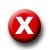
<style>
.page{position:relative;width:50px;height:50px;background:#ffffff}
.page>*{position:absolute;margin:0}
.t1{font:24px "Arial-Black";color:#ffffff}
</style>
<div class="page">
<p class="t1" style="left:15px;top:16px;width:19px;height:18px">X</p>
</div>
